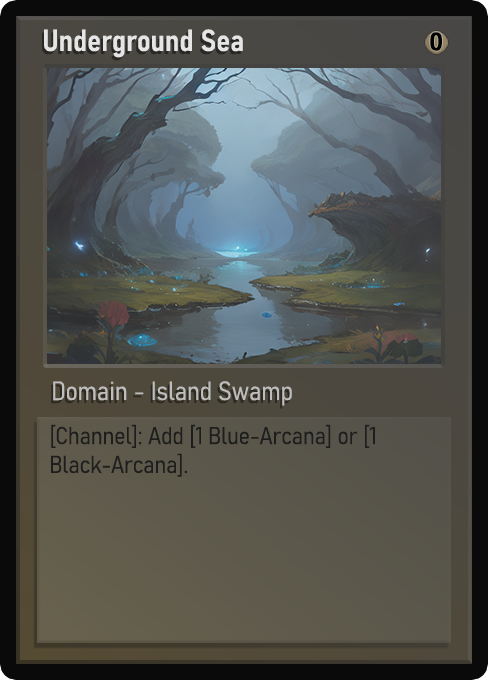
<style>
.page{position:relative;width:488px;height:680px}
.page>*{position:absolute;margin:0}
.t1{font:30px "Bahnschrift-SemiBoldSemiCondensed";color:#f2f2f2;font-weight:bold}
.t2{font:25px "WTRRoycroft";color:#000000;font-weight:bold;scale:1.09 1}
.t3{font:26px "Bahnschrift-LightSemiCondensed";color:#c8c8c8;font-weight:bold}
.t4{font:24px "Bahnschrift-LightSemiCondensed";color:#1e1e1e;font-weight:bold}
</style>
<div class="page">
<p class="t1" style="left:44px;top:29px;width:199px;height:29px;opacity:0.9">Underground Sea</p>
<p class="t2" style="left:430px;top:32px;width:12px;height:19px">0</p>
<p class="t3" style="left:53px;top:381px;width:239px;height:25px;opacity:0.9">Domain - Island Swamp</p>
<p class="t4" style="left:51px;top:424px;width:324px;height:53px">[Channel]: Add [1 Blue-Arcana] or [1 Black-Arcana].</p>
</div>
